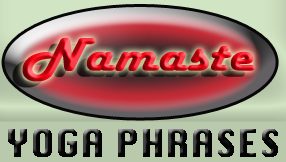
<style>
.page{position:relative;width:286px;height:162px}
.page>*{position:absolute;margin:0}
.t1{font:36px "Silom";color:#060606;font-weight:bold}
</style>
<div class="page">
<p class="t1" style="left:8px;top:129px;width:270px;height:28px">YOGA PHRASES</p>
</div>
